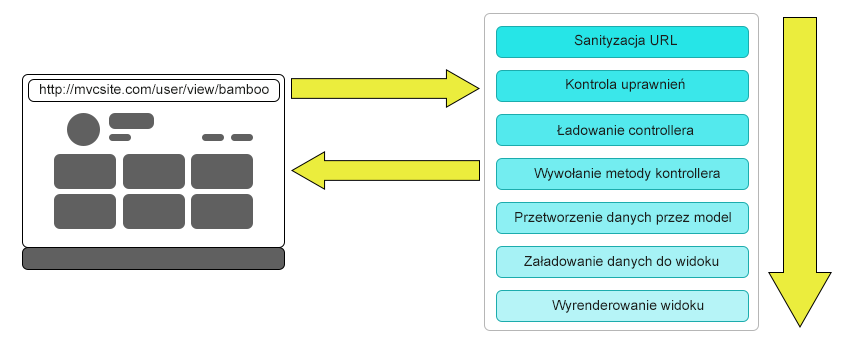
<style>
.page{position:relative;width:849px;height:348px;background:#ffffff}
.page>*{position:absolute;margin:0}
.t1{font:14px "ArialMT";color:#1c1d1a}
</style>
<div class="page">
<p class="t1" style="left:574px;top:34px;width:103px;height:14px">Sanityzacja URL</p>
<p class="t1" style="left:566px;top:78px;width:119px;height:14px">Kontrola uprawnień</p>
<p class="t1" style="left:40px;top:84px;width:229px;height:13px">http://mvcsite.com/user/view/bamboo</p>
<p class="t1" style="left:557px;top:125px;width:137px;height:10px">Ładowanie controllera</p>
<p class="t1" style="left:534px;top:168px;width:186px;height:13px">Wywołanie metody kontrollera</p>
<p class="t1" style="left:515px;top:212px;width:216px;height:13px">Przetworzenie danych przez model</p>
<p class="t1" style="left:524px;top:256px;width:195px;height:13px">Załadowanie danych do widoku</p>
<p class="t1" style="left:552px;top:300px;width:152px;height:13px">Wyrenderowanie widoku</p>
</div>
